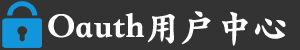
<style>
.page{position:relative;width:300px;height:50px;background:#333333}
.page>*{position:absolute;margin:0}
.t1{font:36px "STKaitiSC-Black";color:#ffffff}
</style>
<div class="page">
<p class="t1" style="left:48px;top:11px;width:238px;height:35px">Oauth用户中心</p>
</div>
